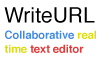
<style>
.page{position:relative;width:100px;height:60px;background:#ffffff}
.page>*{position:absolute;margin:0}
.t1{font:21px "Helvetica";color:#000000}
.t2{font:11px/14px "Helvetica-Bold";color:#3f88e3}
.t3{font:11px/14px "Helvetica-Bold";color:#dcdc10}
.t4{font:11px/14px "Helvetica-Bold";color:#e13838}
</style>
<div class="page">
<p class="t1" style="left:4px;top:7px;width:91px;height:16px">WriteURL</p>
<p class="t2" style="left:4px;top:30px;width:92px;height:23px">Collaborative <span class="t3">real<br>time </span><span class="t4">text editor</span></p>
</div>
